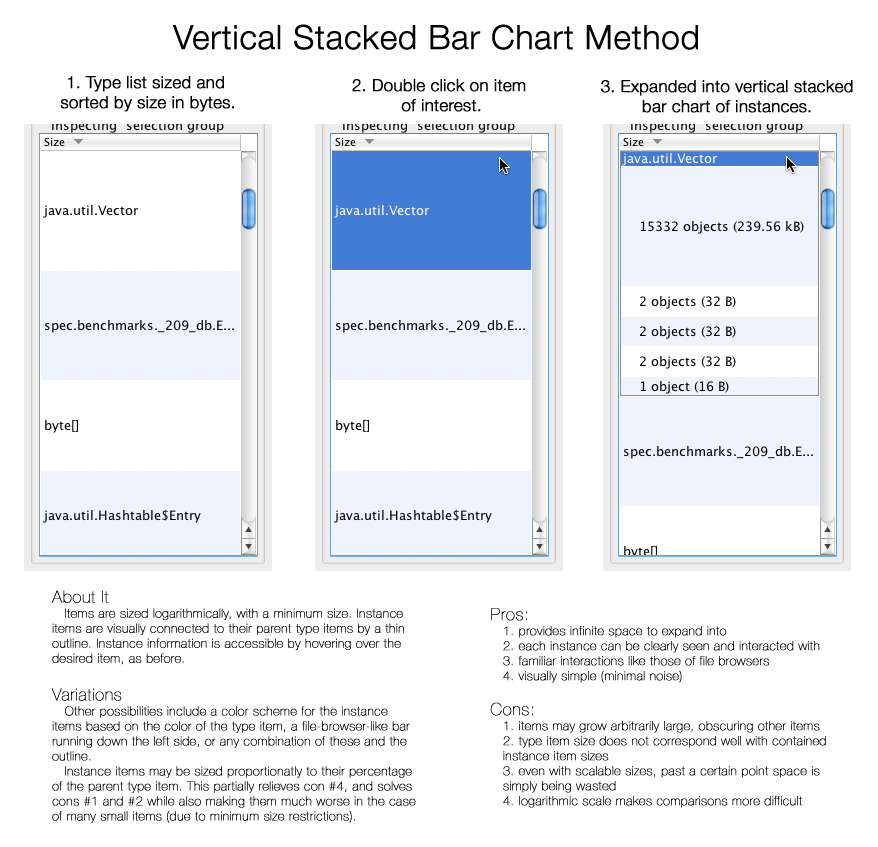
<style>
.page{position:relative;width:878px;height:847px;background:#ffffff}
.page>*{position:absolute;margin:0}
.t1{font:33.3px "HelveticaNeue-Light";color:#000000;font-weight:bold}
.t2{font:16.7px "HelveticaNeue-Light";color:#000000;font-weight:bold}
.t3{font:12.5px "HelveticaNeue-UltraLight";letter-spacing:0.025em;color:#000000;font-weight:bold}
.t4{font:16.7px "HelveticaNeue-UltraLight";letter-spacing:0.025em;color:#000000;font-weight:bold}
</style>
<div class="page">
<p class="t1" style="left:172px;top:24px;width:526px;height:26px">Vertical Stacked Bar Chart Method</p>
<p class="t2" style="left:60px;top:76px;width:174px;height:36px;text-align:center">1. Type list sized and <br>sorted by size in bytes.</p>
<p class="t2" style="left:352px;top:79px;width:174px;height:33px;text-align:center">2. Double click on item<br> of interest.</p>
<p class="t2" style="left:601px;top:80px;width:252px;height:33px;text-align:center">3. Expanded into vertical stacked<br>bar chart of instances.</p>
<p class="t3" style="left:51px;top:590px;width:353px;height:75px"><span class="t4">About It<br></span>Items are sized logarithmically, with a minimum size. Instance items are visually connected to their parent type items by a thin outline. Instance information is accessible by hovering over the desired item, as before.</p>
<p class="t3" style="left:490px;top:608px;width:336px;height:200px"><span class="t4">Pros:<br></span>1. provides infinite space to expand into<br>2. each instance can be clearly seen and interacted with<br>3. familiar interactions like those of file browsers<br>4. visually simple (minimal noise)<br><br><span class="t4">Cons:<br></span>1. items may grow arbitrarily large, obscuring other items<br>2. type item size does not correspond well with contained instance item sizes<br>3. even with scalable sizes, past a certain point space is simply being wasted<br>4. logarithmic scale makes comparisons more difficult</p>
<p class="t3" style="left:51px;top:688px;width:365px;height:135px"><span class="t4">Variations<br></span>Other possibilities include a color scheme for the instance items based on the color of the type item, a file-browser-like bar running down the left side, or any combination of these and the outline.<br>Instance items may be sized proportionatly to their percentage of the parent type item. This partially relieves con #4, and solves cons #1 and #2 while also making them much worse in the case of many small items (due to minimum size restrictions).</p>
</div>
